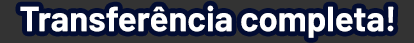
<style>
.page{position:relative;width:414px;height:43px;background:#333333}
.page>*{position:absolute;margin:0}
.t1{font:34.7px "Barlow-Bold";color:#ffffff}
</style>
<div class="page">
<p class="t1" style="left:20px;top:5px;width:374px;height:33px">Transferência completa!</p>
</div>
